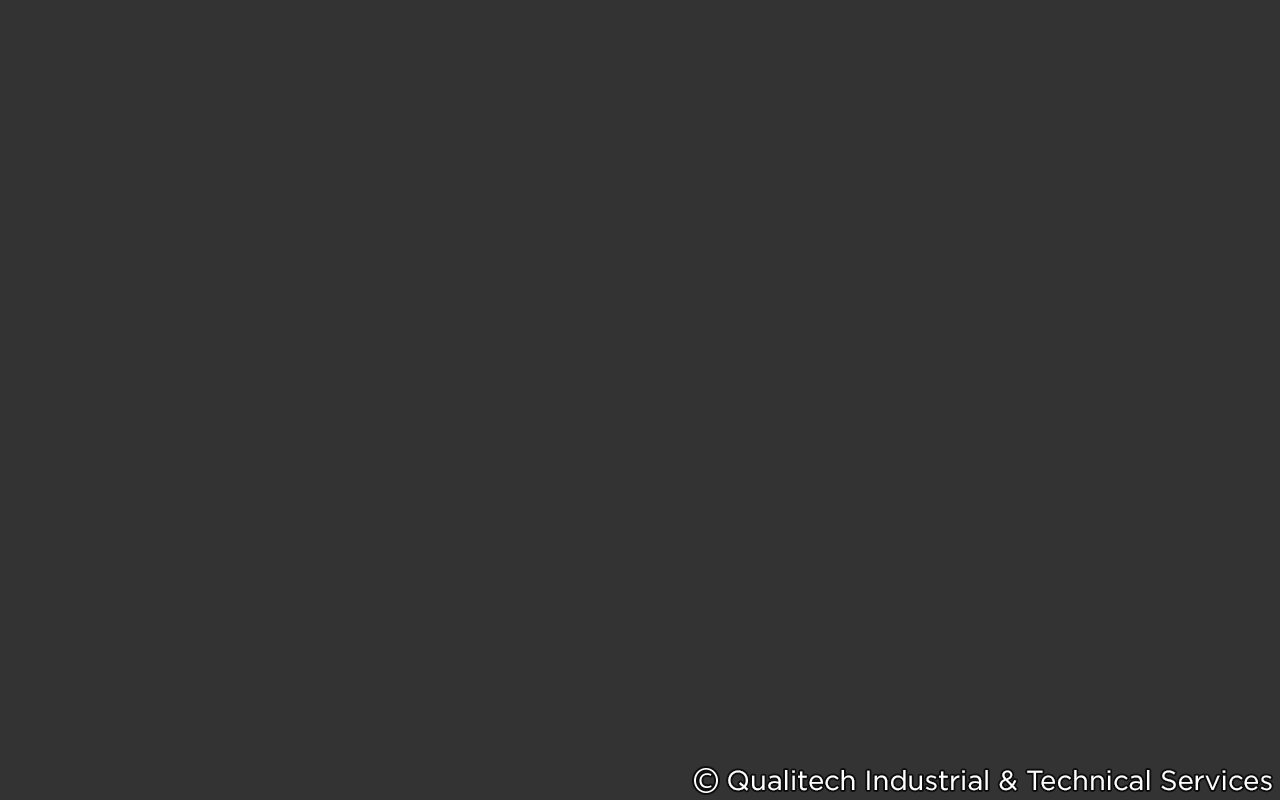
<style>
.page{position:relative;width:1280px;height:800px;background:#333333}
.page>*{position:absolute;margin:0}
.t1{font:27.4px "Gotham-Book";color:#ffffff}
</style>
<div class="page">
<p class="t1" style="left:728px;top:770px;width:544px;height:21px">Qualitech Industrial &amp; Technical Services</p>
</div>
